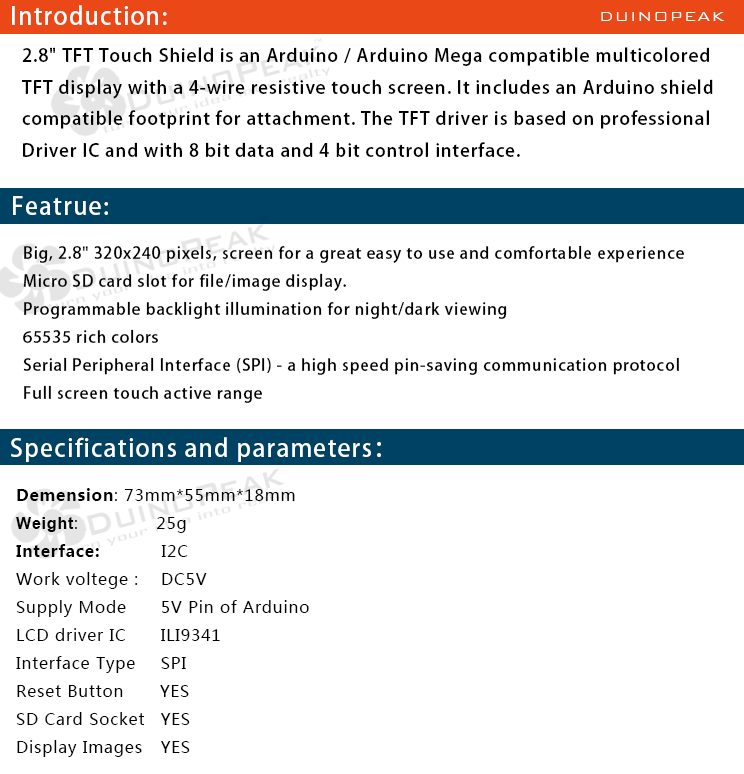
<style>
.page{position:relative;width:744px;height:774px;background:#ffffff}
.page>*{position:absolute;margin:0}
.t1{font:24px "AdobeHeitiStd-Regular";letter-spacing:0.05em;color:#ffffff}
.t2{font:18px "BankGothicBT-Light";letter-spacing:0.05em;color:#ffffff}
.t3{font:18px "AdobeHeitiStd-Regular";letter-spacing:0.05em;color:#000000}
.t4{font:16px "AdobeHeitiStd-Regular";letter-spacing:0.05em;color:#000000}
.t5{font:16px "MicrosoftYaHei";letter-spacing:0.05em;color:#000000}
.t6{font:16px "MicrosoftYaHei-Bold";letter-spacing:0.05em;color:#000000}
.t7{font:16px "Arial-BoldMT";letter-spacing:0.05em;color:#000000}
</style>
<div class="page">
<p class="t1" style="left:12px;top:5px;width:155px;height:20px">Introduction:</p>
<p class="t2" style="left:601px;top:12px;width:124px;height:9px">DUINOPEAK</p>
<p class="t3" style="left:21px;top:47px;width:692px;height:110px">2.8" TFT Touch Shield is an Arduino / Arduino Mega compatible multicolored <br>TFT display with a 4-wire resistive touch screen. It includes an Arduino shield <br>compatible footprint for attachment. The TFT driver is based on professional <br>Driver IC and with 8 bit data and 4 bit control interface.</p>
<p class="t1" style="left:13px;top:196px;width:95px;height:19px">Featrue:</p>
<p class="t4" style="left:23px;top:245px;width:661px;height:158px">Big, 2.8" 320x240 pixels, screen for a great easy to use and comfortable experience<br>Micro SD card slot for file/image display.<br>Programmable backlight illumination for night/dark viewing<br>65535 rich colors<br>Serial Peripheral Interface (SPI) - a high speed pin-saving communication protocol<br>Full screen touch active range</p>
<p class="t1" style="left:11px;top:437px;width:370px;height:25px">Specifications and parameters：</p>
<p class="t5" style="left:16px;top:488px;width:293px;height:269px"><span class="t6">Demension</span>: 73mm*55mm*18mm<br><span class="t7">Weight</span>:              25g<br><span class="t6">Interface:           </span>I2C<br>Work voltege :    DC5V<br>Supply Mode 5V Pin of Arduino<br>LCD driver IC ILI9341<br>Interface Type SPI<br>Reset Button  YES<br>SD Card Socket YES<br>Display Images YES</p>
</div>
